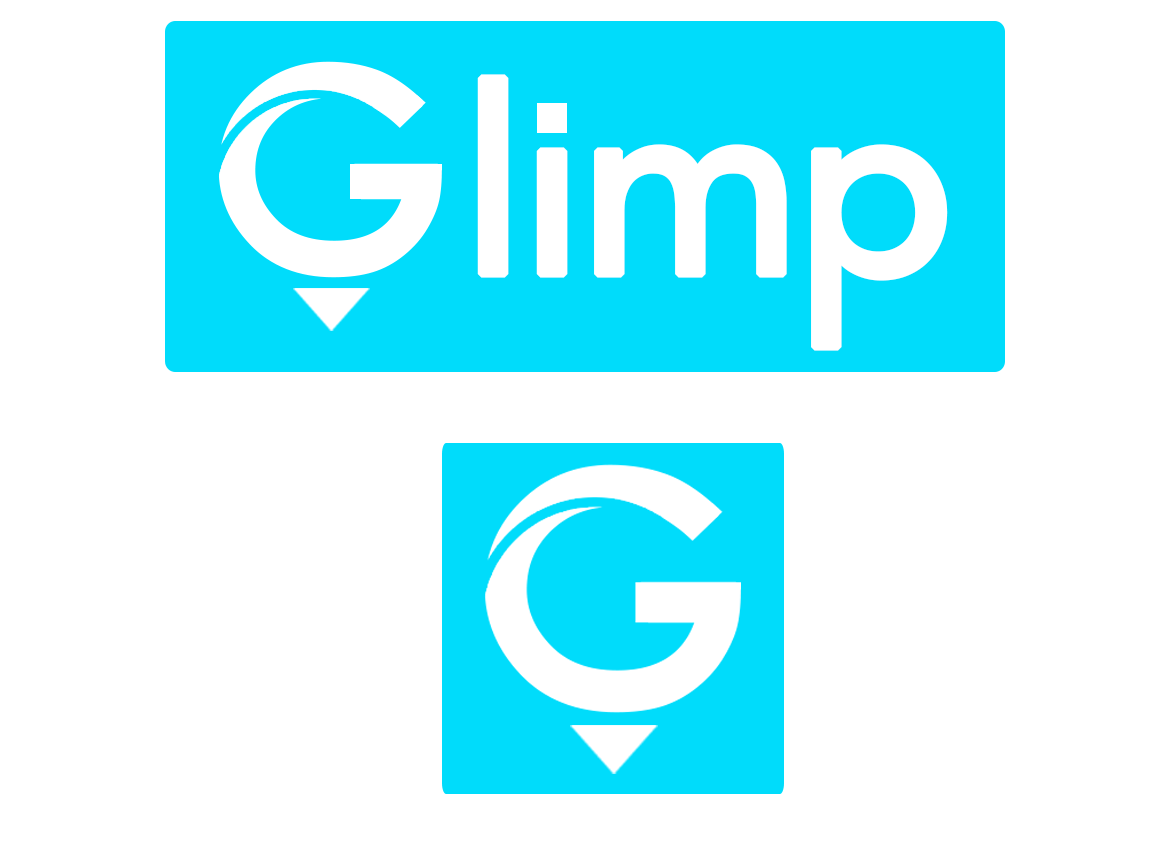
<style>
.page{position:relative;width:1152px;height:864px;background:#ffffff}
.page>*{position:absolute;margin:0}
.t1{font:259px "Avenir-Medium";letter-spacing:-0.04em;color:#ffffff;font-weight:bold}
</style>
<div class="page">
<p class="t1" style="left:477px;top:74px;width:471px;height:277px">limp</p>
</div>
